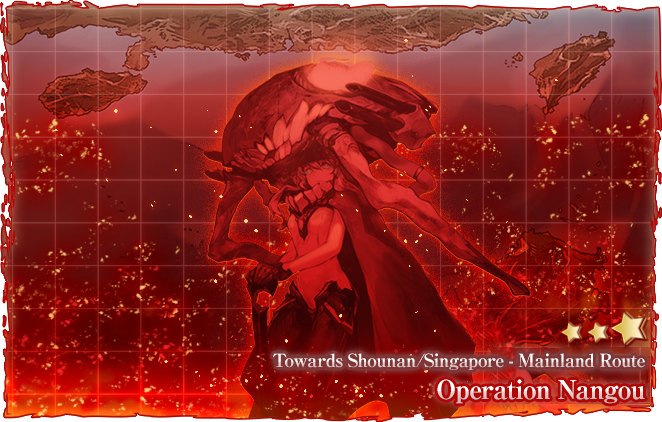
<style>
.page{position:relative;width:662px;height:422px}
.page>*{position:absolute;margin:0}
.t1{font:18px "RyuminPro-ExBold";letter-spacing:-0.04em}
.t2{font:26px "RyuminPro-ExBold";letter-spacing:-0.04em}
</style>
<div class="page">
<p class="t1" style="left:273px;top:353px;width:372px;height:17px">Towards Shounan/Singapore - Mainland Route</p>
<p class="t2" style="left:437px;top:379px;width:208px;height:25px">Operation Nangou</p>
</div>
